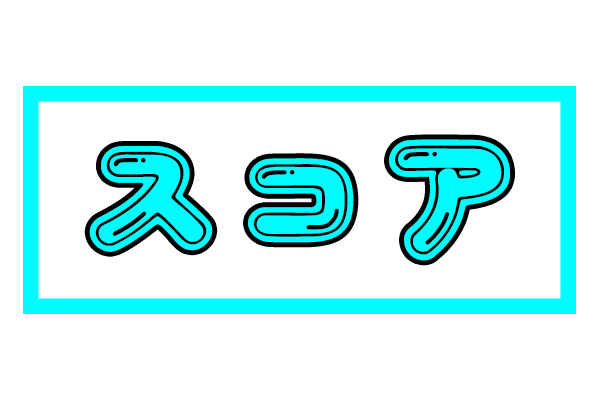
<style>
.page{position:relative;width:600px;height:400px;background:#ffffff}
.page>*{position:absolute;margin:0}
.t1{font:150px "DokiDokiFantasia";color:#00fcff}
</style>
<div class="page">
<p class="t1" style="left:89px;top:139px;width:421px;height:122px">スコア</p>
</div>
